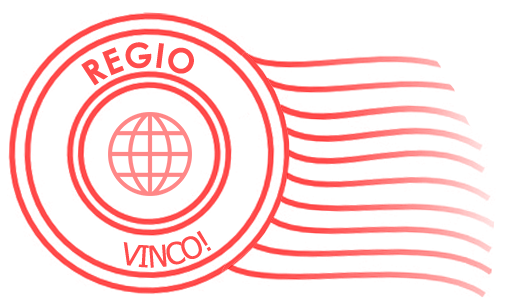
<style>
.page{position:relative;width:512px;height:298px;background:#ffffff}
.page>*{position:absolute;margin:0}
.t1{font:34px "CenturyGothic-Bold";color:#ff4c4c}
.t2{font:30px "Tahoma";color:#ff4c4c}
</style>
<div class="page">
<p class="t1" style="left:81px;top:42px;width:113px;height:44px;rotate:3deg">REGIO</p>
<p class="t2" style="left:123px;top:230px;width:89px;height:38px;rotate:3deg">VINCO!</p>
</div>
